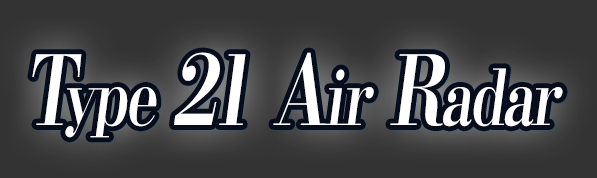
<style>
.page{position:relative;width:597px;height:178px;background:#333333}
.page>*{position:absolute;margin:0}
.t1{font:96px "KochoStd-Heavy";letter-spacing:-0.04em;color:#ffffff;font-style:italic;scale:0.75 1}
.t2{font:76.8px "KochoStd-Heavy";letter-spacing:-0.04em;color:#ffffff;font-style:italic;scale:0.75 1}
</style>
<div class="page">
<p class="t1" style="left:32px;top:52px;width:531px;height:86px">T<span class="t2">ype </span>21 A<span class="t2">ir</span> R<span class="t2">adar</span></p>
</div>
